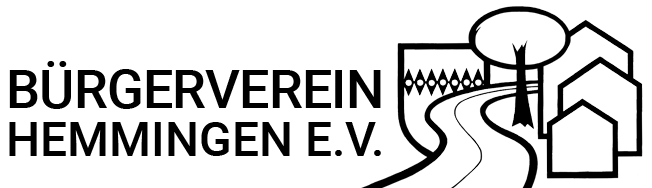
<style>
.page{position:relative;width:652px;height:188px;background:#ffffff}
.page>*{position:absolute;margin:0}
.t1{font:48px/48px "Roboto-Medium";color:#000000}
.t2{font:53.5px/48px "Roboto-Medium";color:#000000}
</style>
<div class="page">
<p class="t1" style="left:9px;top:61px;width:372px;height:95px;text-align:center"><span class="t2">BÜRGERVEREIN<br></span>HEMMINGEN E.V.</p>
</div>
